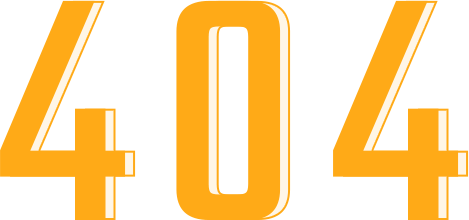
<style>
.page{position:relative;width:469px;height:220px;background:#ffffff}
.page>*{position:absolute;margin:0}
.t1{font:350px "Teko-Regular";letter-spacing:0.1em;color:#ffaa17;text-transform:uppercase}
</style>
<div class="page">
<p class="t1" style="left:0px;top:0px;width:459px;height:220px">404</p>
<p class="t1" style="left:10px;top:0px;width:459px;height:220px">404</p>
</div>
